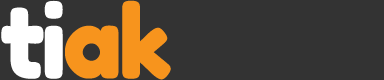
<style>
.page{position:relative;width:384px;height:80px;background:#333333}
.page>*{position:absolute;margin:0}
.t1{font:100.5px "FredokaOne-Regular";letter-spacing:-0.04em;color:#ffffff}
.t2{font:100.5px "FredokaOne-Regular";letter-spacing:-0.04em;color:#f7941d}
</style>
<div class="page">
<p class="t1" style="left:1px;top:0px;width:170px;height:80px">ti<span class="t2">ak</span></p>
</div>
